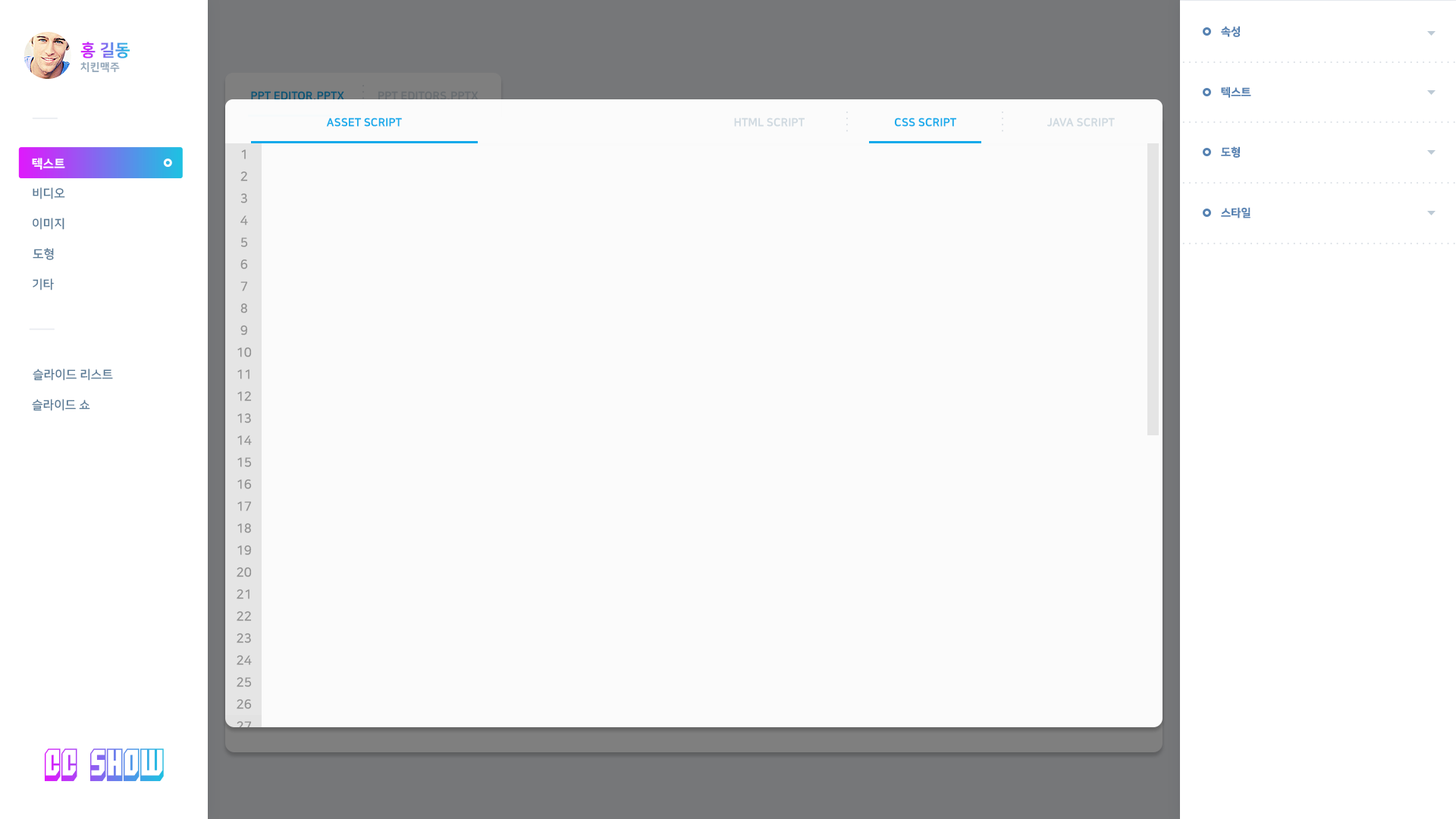
<style>
.page{position:relative;width:1456px;height:819px;background:#fbfbfb}
.page>*{position:absolute;margin:0}
.t1{font:11.1px "NanumSquareEB";color:#5682b2}
.t2{font:16.7px "NanumSquareEB";text-transform:uppercase}
.t3{font:10.6px "NanumSquareEB";letter-spacing:0.025em;color:#94a8ba;text-transform:uppercase}
.t4{font:11.1px "NanumSquareEB";color:#095575;text-transform:uppercase}
.t5{font:11.1px "NanumSquareEB";color:#676c70;text-transform:uppercase}
.t6{font:11.1px "NanumSquareEB";color:#12aaeb;text-transform:uppercase}
.t7{font:11.1px "NanumSquareEB";color:#cfd9e0;text-transform:uppercase}
.t8{font:12.6px "NanumSquareB";color:#909090;text-transform:uppercase}
.t9{font:12.1px "NanumSquareEB";color:#ffffff;text-transform:uppercase}
.t10{font:12.1px "NanumSquareB";color:#597a96;text-transform:uppercase}
.t11{font:31.6px "Blockt"}
</style>
<div class="page">
<p class="t1" style="left:1221px;top:26px;width:19px;height:11px">속성</p>
<p class="t2" style="left:80px;top:42px;width:50px;height:16px">홍 길동</p>
<p class="t3" style="left:80px;top:61px;width:40px;height:12px">치킨맥주</p>
<p class="t1" style="left:1221px;top:86px;width:30px;height:12px">텍스트</p>
<p class="t4" style="left:251px;top:91px;width:93px;height:10px">PPT editor.pptx</p>
<p class="t5" style="left:378px;top:91px;width:101px;height:10px">PPT EDITORS.PPTX</p>
<p class="t6" style="left:326px;top:118px;width:76px;height:9px">Asset Script</p>
<p class="t7" style="left:734px;top:118px;width:71px;height:9px">html Script</p>
<p class="t6" style="left:894px;top:118px;width:63px;height:9px">CSS Script</p>
<p class="t7" style="left:1047px;top:118px;width:68px;height:9px">JAVA Script</p>
<p class="t8" style="left:241px;top:149px;width:5px;height:10px">1</p>
<p class="t1" style="left:1221px;top:146px;width:19px;height:12px">도형</p>
<p class="t9" style="left:32px;top:158px;width:33px;height:12px">텍스트</p>
<p class="t8" style="left:240px;top:171px;width:8px;height:10px">2</p>
<p class="t10" style="left:33px;top:187px;width:32px;height:12px">비디오</p>
<p class="t8" style="left:240px;top:193px;width:7px;height:10px">3</p>
<p class="t1" style="left:1221px;top:207px;width:29px;height:11px">스타일</p>
<p class="t10" style="left:33px;top:218px;width:31px;height:12px">이미지</p>
<p class="t8" style="left:240px;top:215px;width:8px;height:10px">4</p>
<p class="t8" style="left:241px;top:237px;width:7px;height:10px">5</p>
<p class="t10" style="left:33px;top:248px;width:21px;height:12px">도형</p>
<p class="t8" style="left:240px;top:259px;width:8px;height:10px">6</p>
<p class="t10" style="left:33px;top:278px;width:21px;height:12px">기타</p>
<p class="t8" style="left:240px;top:281px;width:8px;height:10px">7</p>
<p class="t8" style="left:240px;top:303px;width:7px;height:10px">8</p>
<p class="t8" style="left:240px;top:325px;width:8px;height:10px">9</p>
<p class="t8" style="left:237px;top:347px;width:15px;height:10px">10</p>
<p class="t10" style="left:33px;top:369px;width:80px;height:12px">슬라이드 리스트</p>
<p class="t8" style="left:237px;top:369px;width:12px;height:10px">11</p>
<p class="t10" style="left:32px;top:399px;width:58px;height:12px">슬라이드 쇼</p>
<p class="t8" style="left:237px;top:391px;width:15px;height:10px">12</p>
<p class="t8" style="left:237px;top:413px;width:14px;height:10px">13</p>
<p class="t8" style="left:237px;top:435px;width:15px;height:10px">14</p>
<p class="t8" style="left:237px;top:457px;width:15px;height:10px">15</p>
<p class="t8" style="left:237px;top:479px;width:15px;height:10px">16</p>
<p class="t8" style="left:237px;top:501px;width:15px;height:10px">17</p>
<p class="t8" style="left:237px;top:523px;width:14px;height:10px">18</p>
<p class="t8" style="left:237px;top:545px;width:15px;height:10px">19</p>
<p class="t8" style="left:237px;top:567px;width:15px;height:10px">20</p>
<p class="t8" style="left:237px;top:589px;width:12px;height:10px">21</p>
<p class="t8" style="left:237px;top:611px;width:15px;height:10px">22</p>
<p class="t8" style="left:237px;top:633px;width:14px;height:10px">23</p>
<p class="t8" style="left:237px;top:655px;width:15px;height:10px">24</p>
<p class="t8" style="left:237px;top:677px;width:15px;height:10px">25</p>
<p class="t8" style="left:237px;top:699px;width:15px;height:10px">26</p>
<p class="t11" style="left:44px;top:748px;width:120px;height:34px">CC SHOW</p>
</div>
